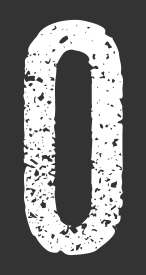
<style>
.page{position:relative;width:146px;height:275px;background:#333333}
.page>*{position:absolute;margin:0}
.t1{font:300px "Asfalto";color:#ffffff}
</style>
<div class="page">
<p class="t1" style="left:23px;top:19px;width:100px;height:237px">O</p>
</div>
